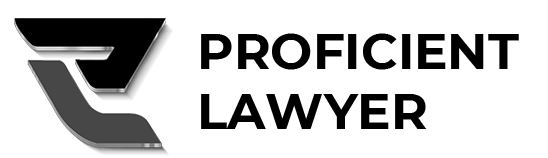
<style>
.page{position:relative;width:548px;height:158px;background:#ffffff}
.page>*{position:absolute;margin:0}
.t1{font:50px "Montserrat-Bold";color:#000000}
</style>
<div class="page">
<p class="t1" style="left:201px;top:33px;width:318px;height:96px">PROFICIENT<br>LAWYER</p>
</div>
